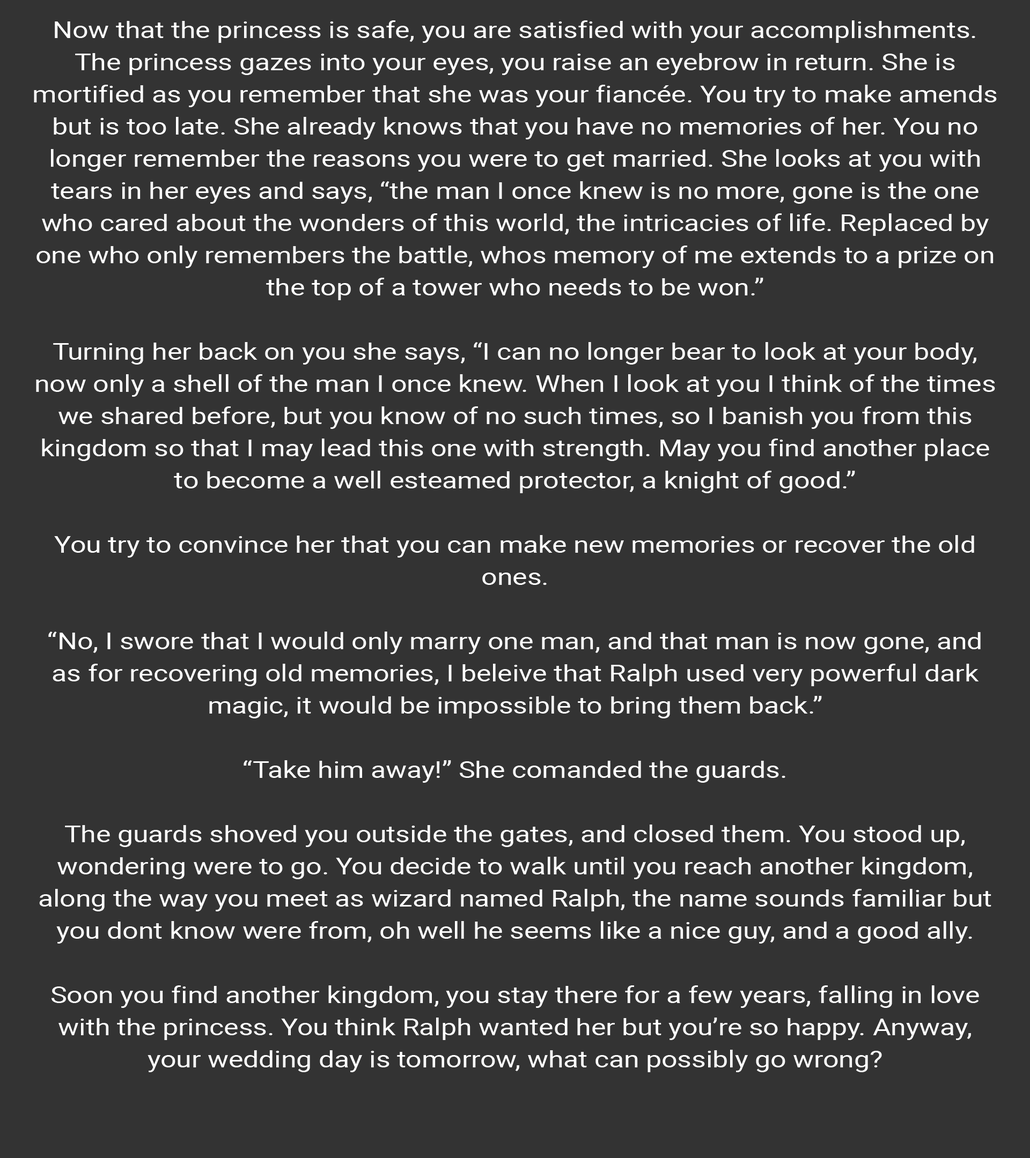
<style>
.page{position:relative;width:1030px;height:1158px;background:#333333}
.page>*{position:absolute;margin:0}
.t1{font:23.1px/32.2px "Roboto-Regular";color:#ffffff;scale:1.2 1}
</style>
<div class="page">
<p class="t1" style="left:34px;top:20px;width:962px;height:1052px;text-align:center">Now that the princess is safe, you are satisfied with your accomplishments. The princess gazes into your eyes, you raise an eyebrow in return. She is mortified as you remember that she was your fiancée. You try to make amends but is too late. She already knows that you have no memories of her. You no longer remember the reasons you were to get married. She looks at you with tears in her eyes and says, “the man I once knew is no more, gone is the one who cared about the wonders of this world, the intricacies of life. Replaced by one who only remembers the battle, whos memory of me extends to a prize on the top of a tower who needs to be won.”<br><br>Turning her back on you she says, “I can no longer bear to look at your body, now only a shell of the man I once knew. When I look at you I think of the times we shared before, but you know of no such times, so I banish you from this kingdom so that I may lead this one with strength. May you find another place to become a well esteamed protector, a knight of good.”<br><br>You try to convince her that you can make new memories or recover the old ones.<br><br>“No, I swore that I would only marry one man, and that man is now gone, and as for recovering old memories, I beleive that Ralph used very powerful dark magic, it would be impossible to bring them back.” <br><br>“Take him away!” She comanded the guards.<br><br>The guards shoved you outside the gates, and closed them. You stood up, wondering were to go. You decide to walk until you reach another kingdom, along the way you meet as wizard named Ralph, the name sounds familiar but you dont know were from, oh well he seems like a nice guy, and a good ally. <br><br>Soon you find another kingdom, you stay there for a few years, falling in love with the princess. You think Ralph wanted her but you’re so happy. Anyway, your wedding day is tomorrow, what can possibly go wrong?</p>
</div>
